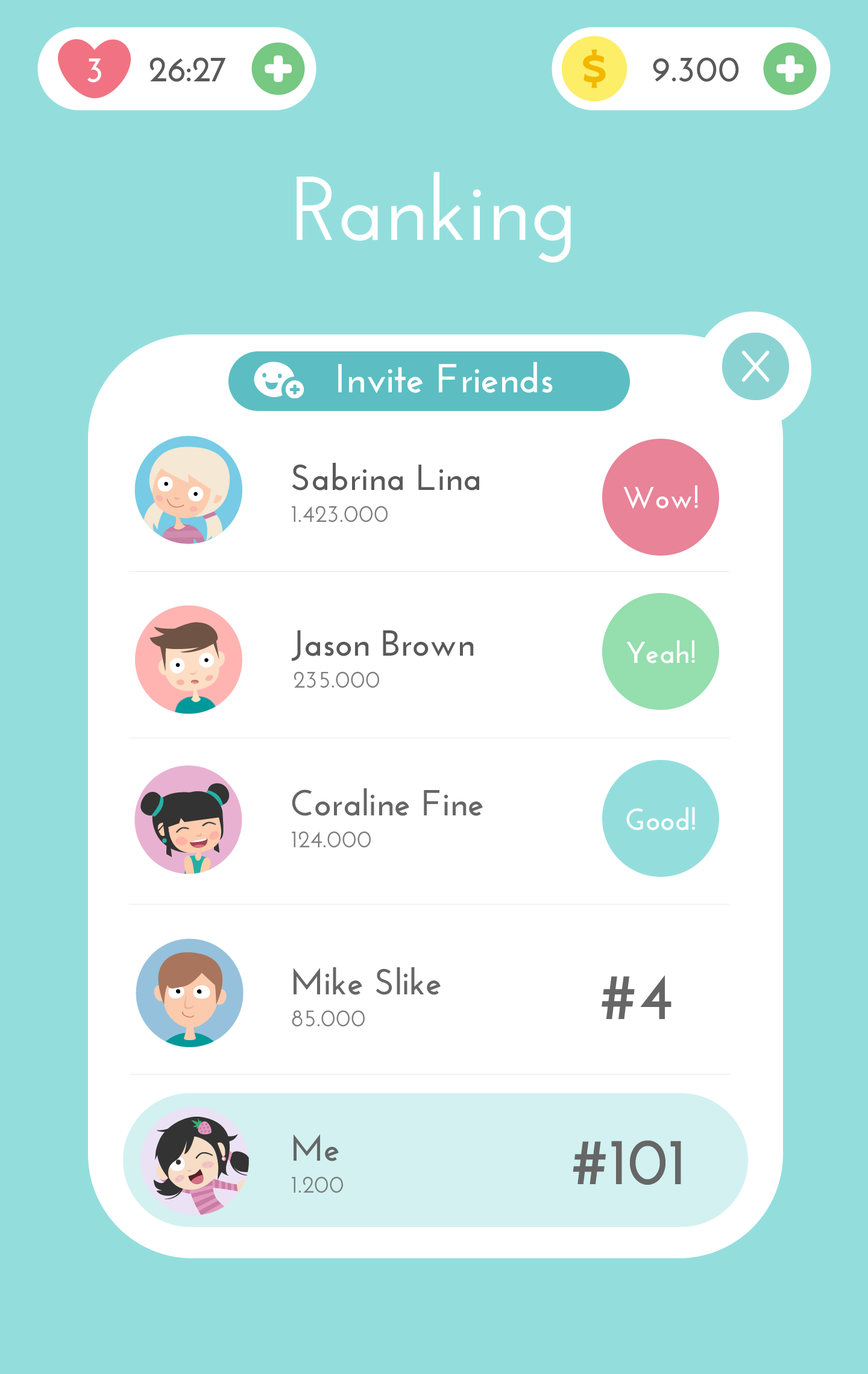
<style>
.page{position:relative;width:868px;height:1374px;background:#93dedd}
.page>*{position:absolute;margin:0}
.t1{font:36.2px "JosefinSans-Bold";color:#ffffff}
.t2{font:36.2px "JosefinSans-Bold";color:#595959}
.t3{font:90.4px "JosefinSans-SemiBold";color:#ffffff}
.t4{font:40.4px "JosefinSans-Bold";color:#ffffff}
.t5{font:30.1px "JosefinSans-Bold";color:#ffffff}
.t6{font:24.1px "JosefinSans-SemiBold";color:#7e7e7e}
.t7{font:36.2px "JosefinSans-Bold";color:#666666}
.t8{font:66.3px "JosefinSans-Bold";color:#666666}
</style>
<div class="page">
<p class="t1" style="left:87px;top:58px;width:14px;height:25px">3</p>
<p class="t2" style="left:149px;top:57px;width:77px;height:25px">26:27</p>
<p class="t2" style="left:653px;top:57px;width:86px;height:25px">9.300</p>
<p class="t3" style="left:297px;top:172px;width:274px;height:91px">Ranking</p>
<p class="t4" style="left:338px;top:362px;width:215px;height:32px">Invite Friends</p>
<p class="t2" style="left:292px;top:463px;width:187px;height:28px">Sabrina Lina</p>
<p class="t5" style="left:623px;top:485px;width:75px;height:24px">Wow!</p>
<p class="t6" style="left:292px;top:506px;width:96px;height:17px">1.423.000</p>
<p class="t2" style="left:292px;top:630px;width:182px;height:31px">Jason Brown</p>
<p class="t5" style="left:626px;top:640px;width:69px;height:24px">Yeah!</p>
<p class="t6" style="left:293px;top:671px;width:86px;height:17px">235.000</p>
<p class="t7" style="left:292px;top:788px;width:191px;height:28px">Coraline Fine</p>
<p class="t5" style="left:626px;top:807px;width:69px;height:23px">Good!</p>
<p class="t6" style="left:292px;top:831px;width:79px;height:17px">124.000</p>
<p class="t7" style="left:293px;top:967px;width:148px;height:28px">Mike Slike</p>
<p class="t8" style="left:601px;top:975px;width:70px;height:44px">#4</p>
<p class="t6" style="left:292px;top:1010px;width:73px;height:17px">85.000</p>
<p class="t7" style="left:293px;top:1134px;width:46px;height:27px">Me</p>
<p class="t8" style="left:573px;top:1140px;width:108px;height:45px">#101</p>
<p class="t6" style="left:292px;top:1176px;width:51px;height:17px">1.200</p>
</div>
